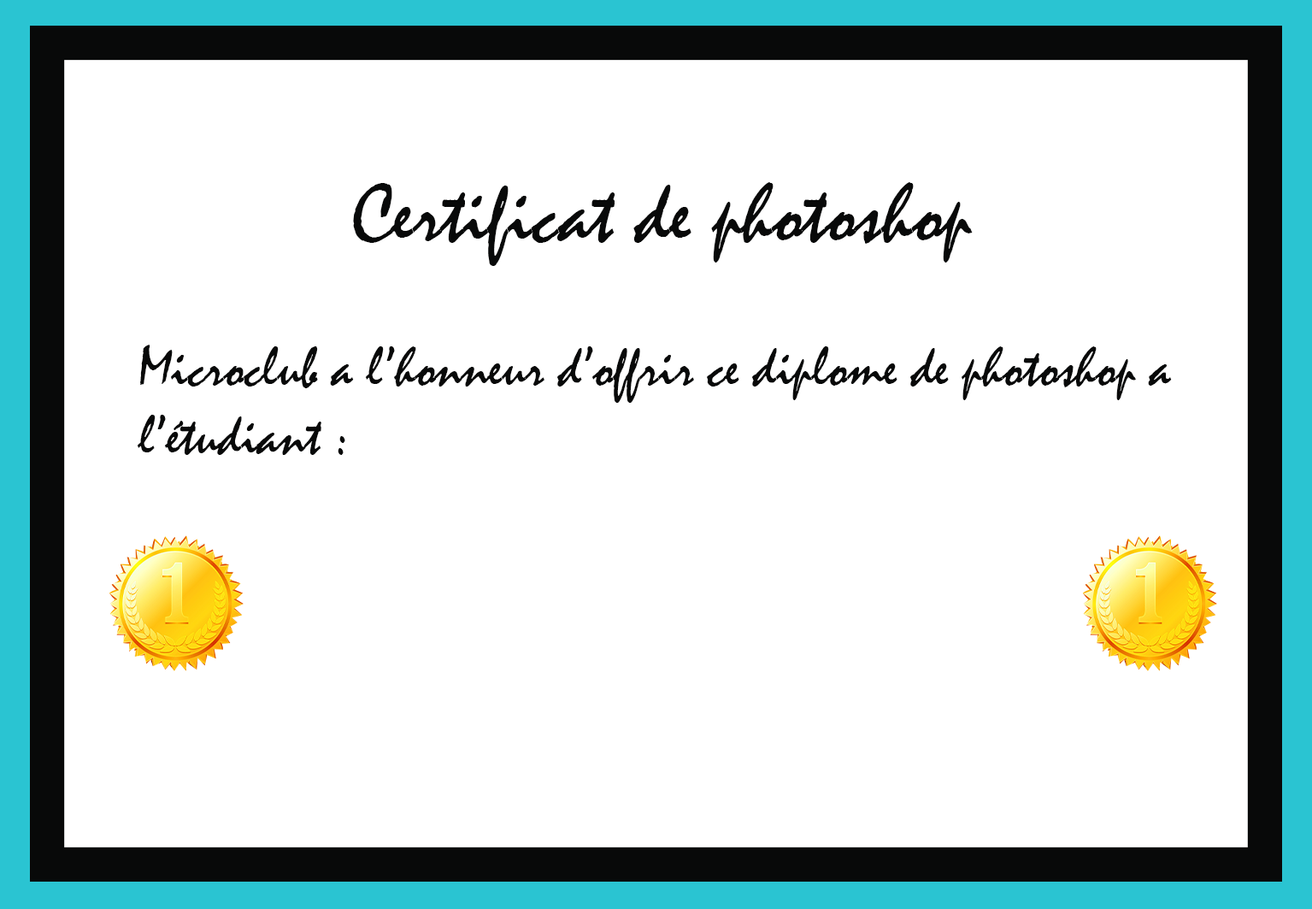
<style>
.page{position:relative;width:1312px;height:909px;background:#ffffff}
.page>*{position:absolute;margin:0}
.t1{font:85.5px "Mistral";color:#080909}
.t2{font:57px "Mistral";color:#080909}
</style>
<div class="page">
<p class="t1" style="left:353px;top:182px;width:620px;height:84px">Certificat de photoshop</p>
<p class="t2" style="left:137px;top:345px;width:1035px;height:110px">Microclub a l’honneur d’offrir ce diplome de photoshop a l’étudiant :</p>
</div>
